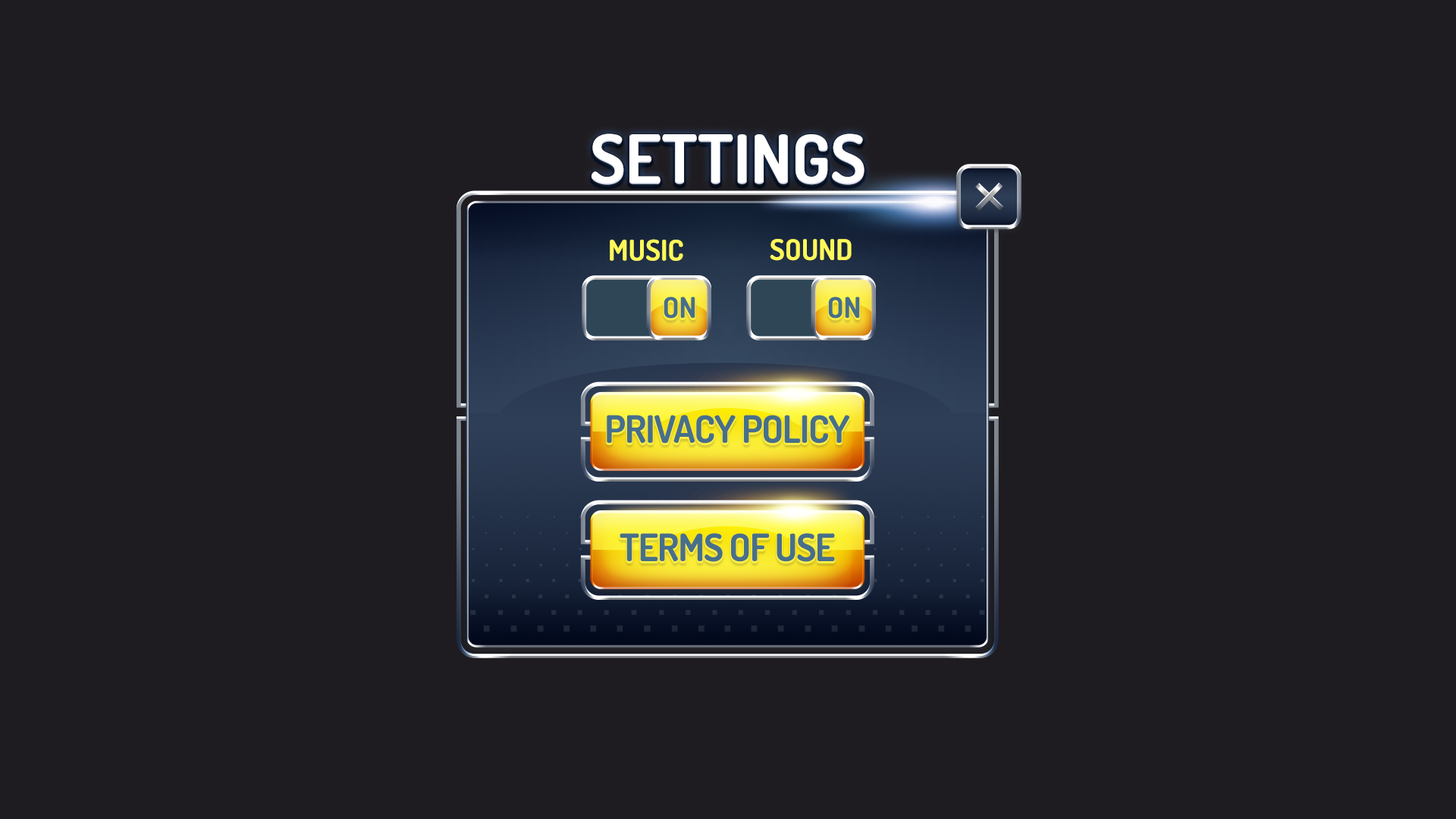
<style>
.page{position:relative;width:1456px;height:819px;background:#1e1c20}
.page>*{position:absolute;margin:0}
.t1{font:68.2px "Dosis-Bold";color:#ffffff;text-transform:uppercase}
.t2{font:28.8px "Dosis-Bold";color:#fef859;text-transform:uppercase}
.t3{font:28.8px "Dosis-Bold";color:#476f8b;text-transform:uppercase}
.t4{font:37.9px "Dosis-Bold";letter-spacing:-0.025em;color:#476f8b;text-transform:uppercase}
</style>
<div class="page">
<p class="t1" style="left:591px;top:133px;width:273px;height:52px">settings</p>
<p class="t2" style="left:610px;top:239px;width:73px;height:22px">music</p>
<p class="t2" style="left:770px;top:239px;width:82px;height:22px">sound</p>
<p class="t3" style="left:664px;top:297px;width:31px;height:21px">on</p>
<p class="t3" style="left:828px;top:297px;width:32px;height:21px">on</p>
<p class="t4" style="left:607px;top:415px;width:243px;height:29px">Privacy Policy</p>
<p class="t4" style="left:620px;top:533px;width:215px;height:29px">Terms of Use</p>
</div>
